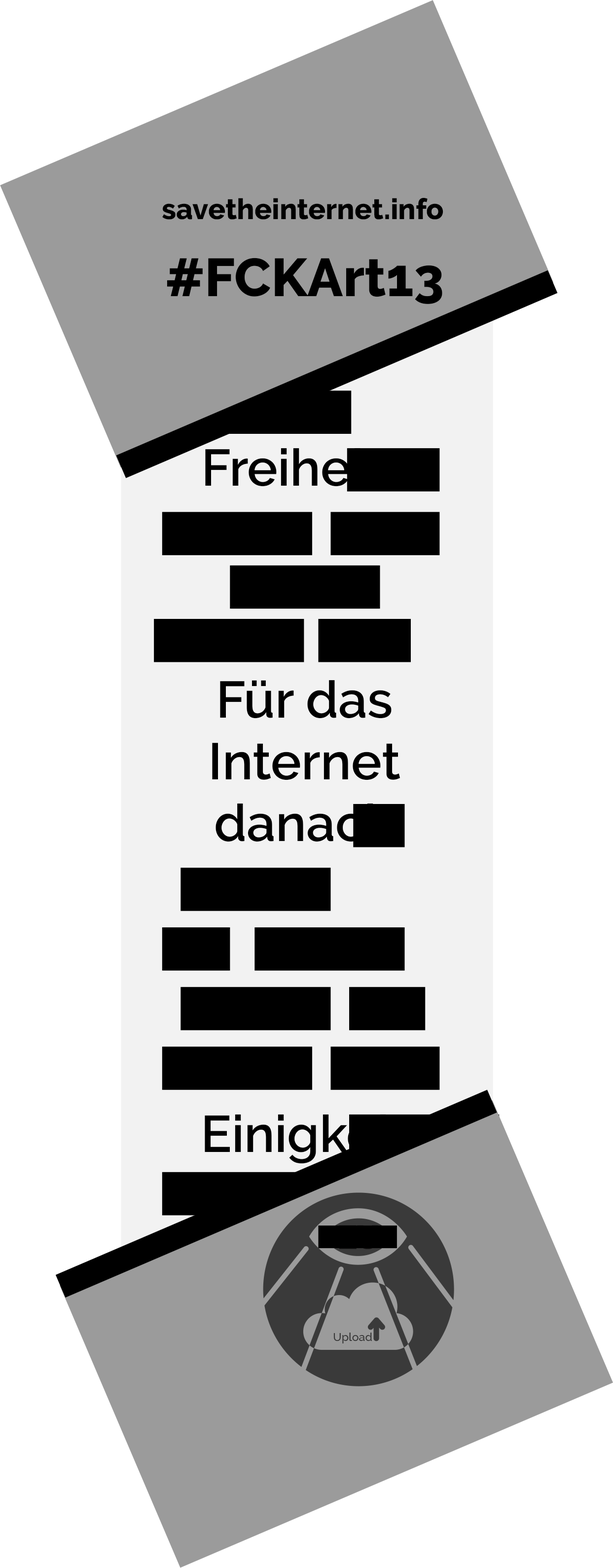
<style>
.page{position:relative;width:613px;height:1568px;background:#ffffff}
.page>*{position:absolute;margin:0}
.t1{font:28.8px "Raleway-ExtraBold";color:#000000}
.t2{font:53.5px "Raleway-ExtraBold";color:#000000}
.t3{font:51.4px "Raleway-SemiBold";color:#000000}
.t4{font:11.4px "Raleway-Medium";letter-spacing:-0.01em;color:#3a3a3a}
.t5{font:11.4px "Raleway-Medium";color:#3a3a3a}
</style>
<div class="page">
<p class="t1" style="left:162px;top:198px;width:282px;height:22px">savetheinternet.info</p>
<p class="t2" style="left:167px;top:258px;width:276px;height:46px">#FCKArt13</p>
<p class="t3" style="left:205px;top:448px;width:178px;height:39px">Freiheit</p>
<p class="t3" style="left:212px;top:680px;width:189px;height:162px;text-align:center">Für das Internet danach</p>
<p class="t3" style="left:205px;top:1114px;width:203px;height:50px">Einigkeit</p>
<p class="t4" style="left:334px;top:1333px;width:7px;height:8px">U</p>
<p class="t5" style="left:343px;top:1333px;width:29px;height:10px">pload</p>
</div>
